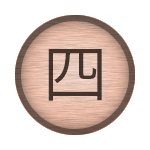
<style>
.page{position:relative;width:150px;height:150px;background:#ffffff}
.page>*{position:absolute;margin:0}
.t1{font:64px "KozGoPr6N-Regular";color:#44342c}
</style>
<div class="page">
<p class="t1" style="left:48px;top:49px;width:54px;height:52px">四</p>
</div>
